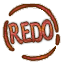
<style>
.page{position:relative;width:64px;height:64px;background:#ffffff}
.page>*{position:absolute;margin:0}
.t1{font:28px "HGPGyoshotai";letter-spacing:-0.06em;scale:0.85 1}
.t2{font:29px "HGPGyoshotai";letter-spacing:-0.06em;scale:0.85 1}
</style>
<div class="page">
<p class="t1" style="left:8px;top:20px;width:45px;height:24px;rotate:-5deg">RED<span class="t2">O</span></p>
<p class="t1" style="left:8px;top:20px;width:45px;height:24px;rotate:-5deg">RED<span class="t2">O</span></p>
</div>
